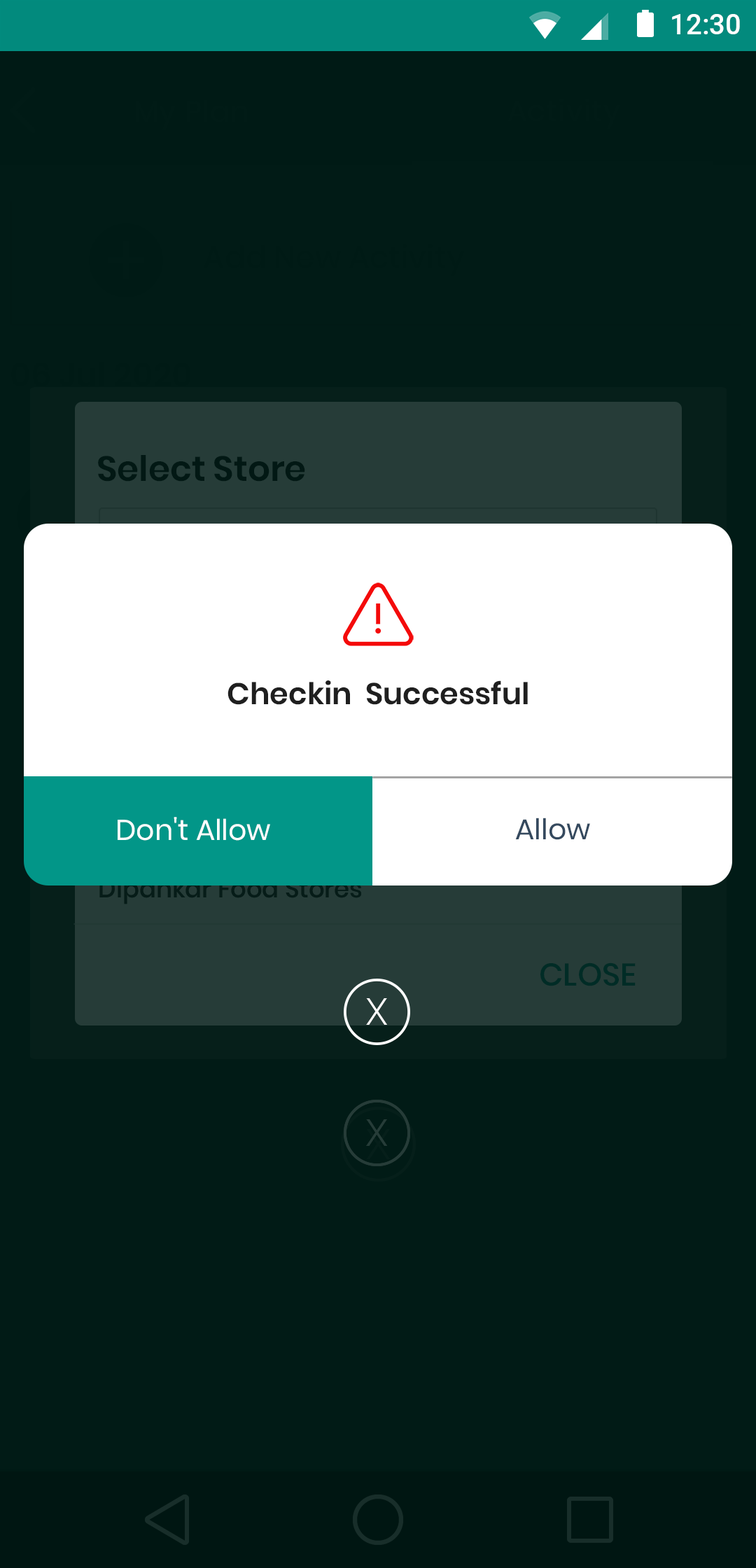
<style>
.page{position:relative;width:756px;height:1568px;background:#011b16}
.page>*{position:absolute;margin:0}
.t1{font:35px "Poppins-SemiBold";color:#0f0f0f}
.t2{font:30.1px "Poppins-SemiBold";color:#1f1f1f}
.t3{font:28.7px "Poppins-Regular";color:#ffffff}
.t4{font:28.7px "Poppins-Regular";color:#34495e}
.t5{font:24.8px "Poppins-Medium";color:#061c18}
.t6{font:31.5px "Poppins-Medium";color:#002c26;text-transform:uppercase}
.t7{font:37.4px "Roboto-Light";color:#ffffff}
.t8{font:37.4px "Roboto-Light";color:#263c38}
</style>
<div class="page">
<p class="t1" style="left:98px;top:455px;width:207px;height:27px">Select Store</p>
<p class="t2" style="left:227px;top:680px;width:301px;height:25px">Checkin  Successful</p>
<p class="t3" style="left:118px;top:817px;width:152px;height:24px">Don't Allow</p>
<p class="t4" style="left:515px;top:818px;width:75px;height:22px">Allow</p>
<p class="t5" style="left:99px;top:878px;width:262px;height:26px">Dipankar Food Stores</p>
<p class="t5" style="left:99px;top:878px;width:262px;height:26px">Dipankar Food Stores</p>
<p class="t6" style="left:540px;top:962px;width:96px;height:24px">Close</p>
<p class="t7" style="left:366px;top:998px;width:21px;height:27px">X</p>
<p class="t8" style="left:366px;top:1119px;width:21px;height:27px">X</p>
<p class="t8" style="left:366px;top:1119px;width:21px;height:27px">X</p>
</div>
